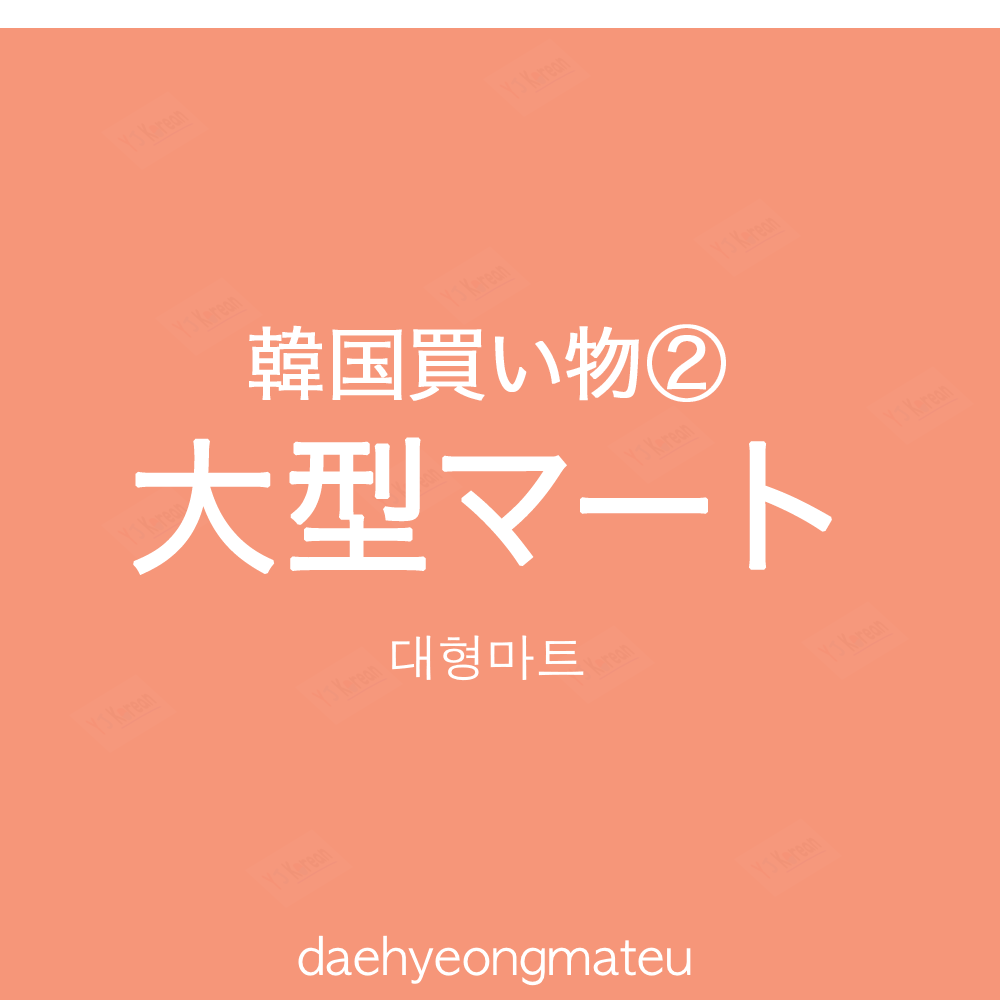
<style>
.page{position:relative;width:1000px;height:1000px;background:#f69679}
.page>*{position:absolute;margin:0}
.t1{font:80px "HiraKakuProN-W3";color:#ffffff;font-weight:bold}
.t2{font:150px "HiraKakuProN-W3";color:#ffffff;font-weight:bold}
.t3{font:50px "AppleGothic";color:#ffffff}
</style>
<div class="page">
<p class="t1" style="left:249px;top:324px;width:477px;height:78px">韓国買い物②</p>
<p class="t2" style="left:133px;top:437px;width:699px;height:138px">大型マート</p>
<p class="t3" style="left:392px;top:635px;width:192px;height:46px">대형마트</p>
<p class="t3" style="left:298px;top:935px;width:393px;height:51px">daehyeongmateu</p>
</div>
